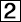
<style>
.page{position:relative;width:21px;height:22px;background:#ffffff}
.page>*{position:absolute;margin:0}
.t1{font:22px "Helvetica";color:#000000;font-weight:bold}
</style>
<div class="page">
<p class="t1" style="left:4px;top:2px;width:12px;height:17px">2</p>
</div>
